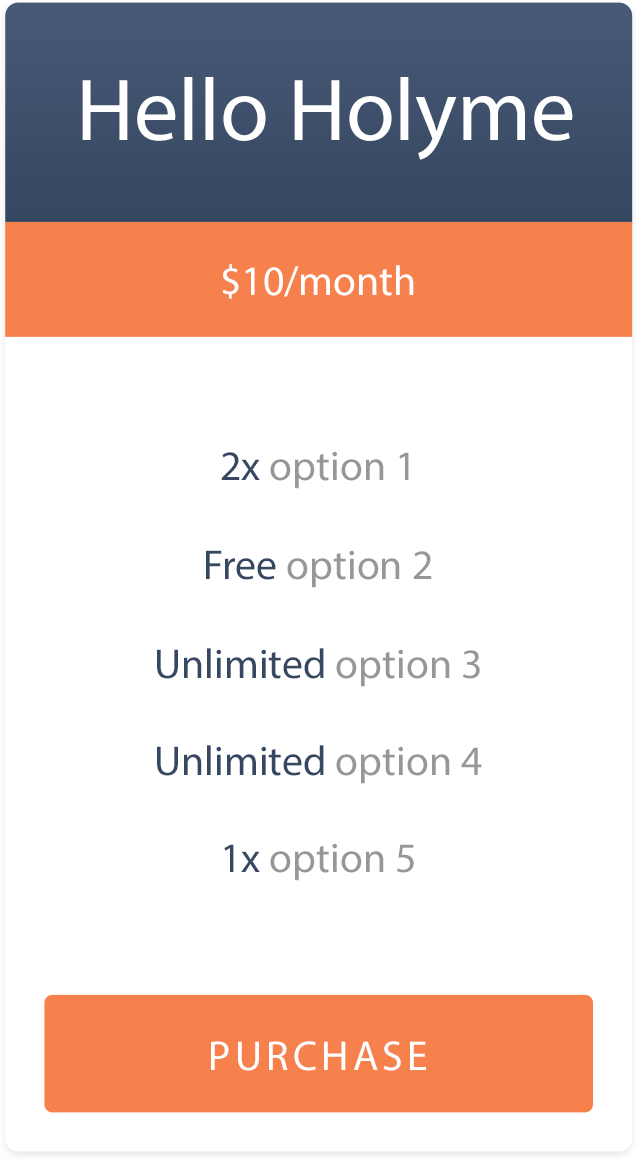
<style>
.page{position:relative;width:640px;height:1162px;background:#ffffff}
.page>*{position:absolute;margin:0}
.t1{font:88.8px "MyriadPro-Regular";color:#ffffff}
.t2{font:41.8px "MyriadPro-Regular";color:#ffffff}
.t3{font:41.8px "MyriadPro-Regular";color:#979797}
.t4{font:41.8px "MyriadPro-Regular";color:#364761}
.t5{font:41.8px "MyriadPro-Regular";letter-spacing:0.1em;color:#ffffff}
</style>
<div class="page">
<p class="t1" style="left:82px;top:77px;width:491px;height:83px">Hello Holyme</p>
<p class="t2" style="left:222px;top:264px;width:192px;height:35px">$10/month</p>
<p class="t3" style="left:221px;top:451px;width:188px;height:38px"><span class="t4">2x </span>option 1</p>
<p class="t3" style="left:206px;top:550px;width:226px;height:38px"><span class="t4">Free </span>option 2</p>
<p class="t4" style="left:157px;top:648px;width:323px;height:39px">Unlimited <span class="t3">option 3</span></p>
<p class="t4" style="left:157px;top:745px;width:325px;height:39px">Unlimited <span class="t3">option 4</span></p>
<p class="t3" style="left:224px;top:843px;width:190px;height:38px"><span class="t4">1x </span>option 5</p>
<p class="t5" style="left:211px;top:1041px;width:215px;height:30px">PURCHASE</p>
</div>
